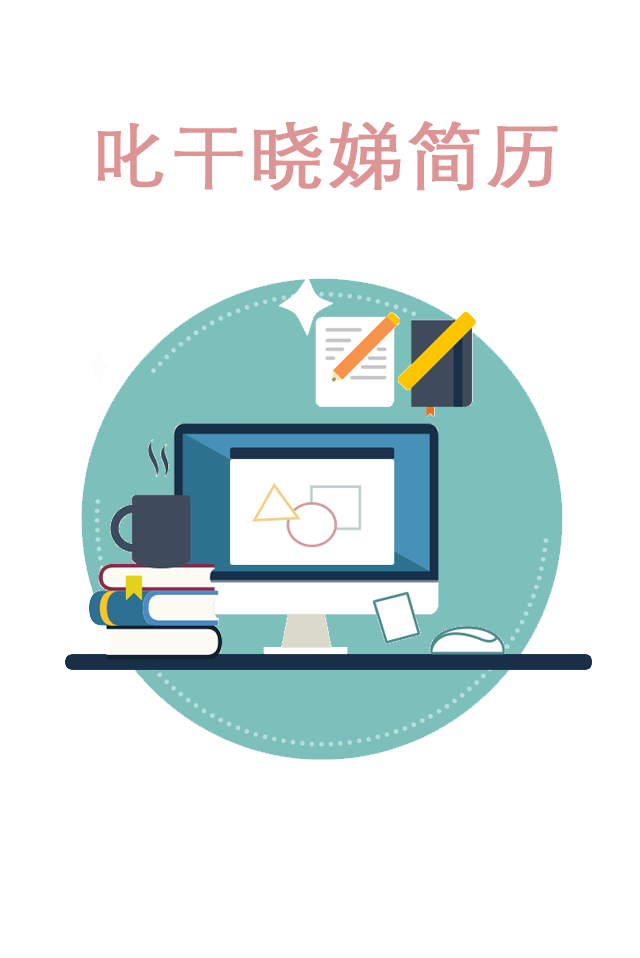
<style>
.page{position:relative;width:640px;height:958px;background:#ffffff}
.page>*{position:absolute;margin:0}
.t1{font:71.9px "DengXian-Regular";letter-spacing:0.005em;color:#dc9494;font-weight:bold;scale:1.06 1}
</style>
<div class="page">
<p class="t1" style="left:97px;top:121px;width:461px;height:70px">叱干晓娣简历</p>
</div>
